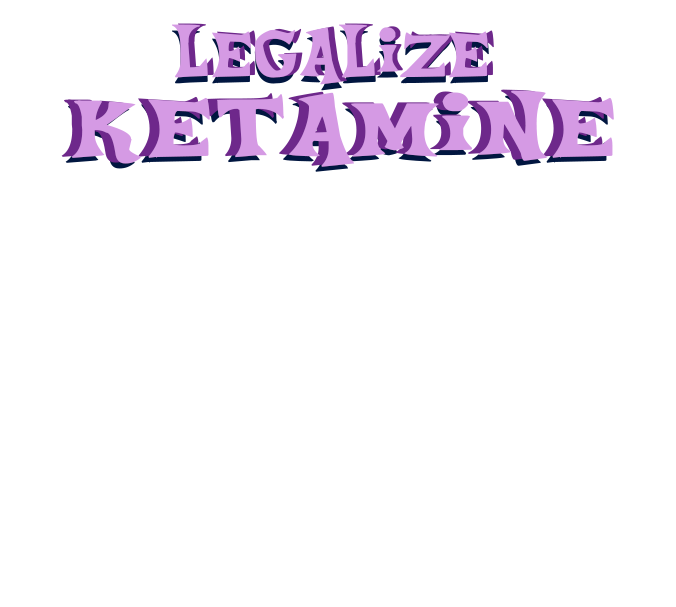
<style>
.page{position:relative;width:676px;height:607px;background:#ffffff}
.page>*{position:absolute;margin:0}
.t1{font:95.8px "Equestria";scale:1.05 1}
.t2{font:125px "Equestria";scale:1.28 1}
</style>
<div class="page">
<p class="t1" style="left:172px;top:30px;width:317px;height:61px">legalize</p>
<p class="t1" style="left:178px;top:23px;width:316px;height:61px">legalize</p>
<p class="t2" style="left:61px;top:89px;width:543px;height:77px">ketamine</p>
<p class="t2" style="left:65px;top:95px;width:543px;height:77px">ketamine</p>
</div>
